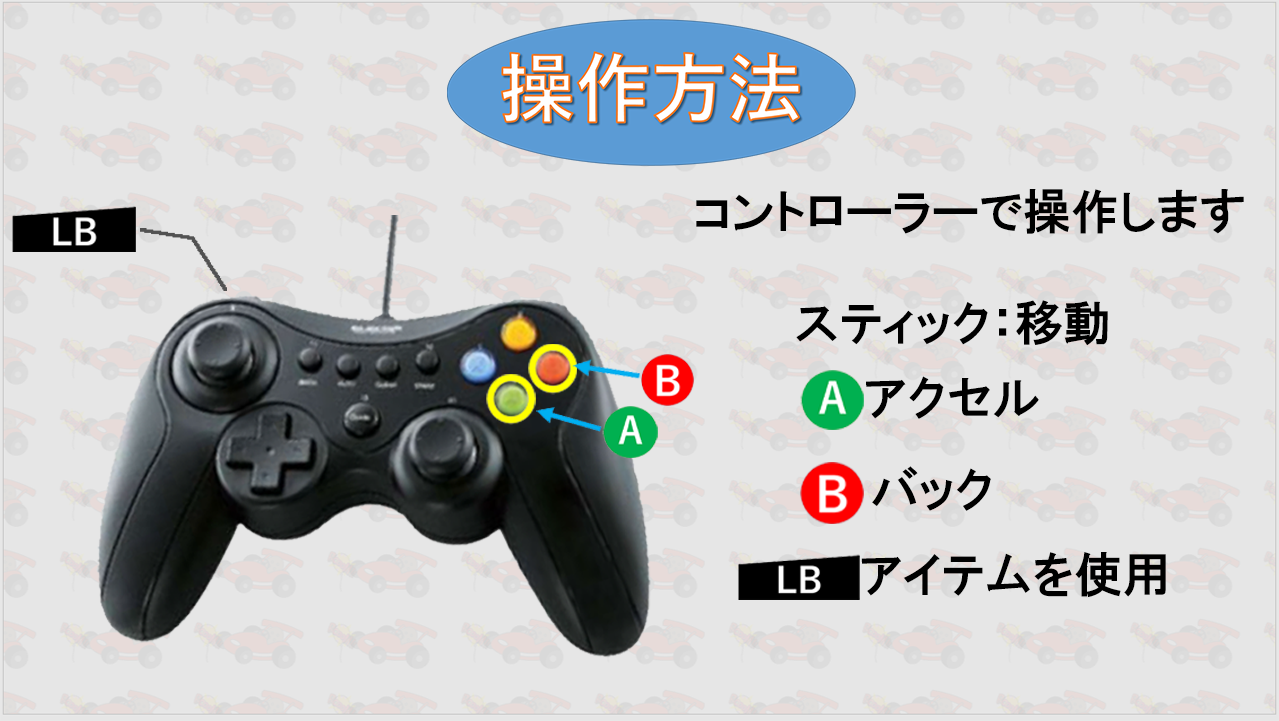
<style>
.page{position:relative;width:1279px;height:721px;background:#e6e6e6}
.page>*{position:absolute;margin:0}
.t1{font:48px "HGPGothicE";color:#000000}
</style>
<div class="page">
<p class="t1" style="left:696px;top:189px;width:548px;height:45px">コントローラーで操作します</p>
<p class="t1" style="left:796px;top:300px;width:312px;height:46px">スティック：移動</p>
<p class="t1" style="left:866px;top:376px;width:173px;height:43px">アクセル</p>
<p class="t1" style="left:872px;top:466px;width:119px;height:45px">バック</p>
<p class="t1" style="left:861px;top:552px;width:305px;height:45px">アイテムを使用</p>
</div>
